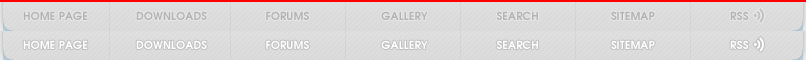
<style>
.page{position:relative;width:806px;height:60px;background:#dadada}
.page>*{position:absolute;margin:0}
.t1{font:11px "AdvanceBold";color:#b3b3b3}
.t2{font:11px "AdvanceBold";color:#ffffff}
</style>
<div class="page">
<p class="t1" style="left:23px;top:11px;width:726px;height:9px">HOME PAGE              DOWNLOADS                 FORUMS                     GALLERY                    SEARCH                     SITEMAP                      RSS</p>
<p class="t2" style="left:23px;top:40px;width:726px;height:9px">HOME PAGE              DOWNLOADS                 FORUMS                     GALLERY                    SEARCH                     SITEMAP                      RSS</p>
</div>
